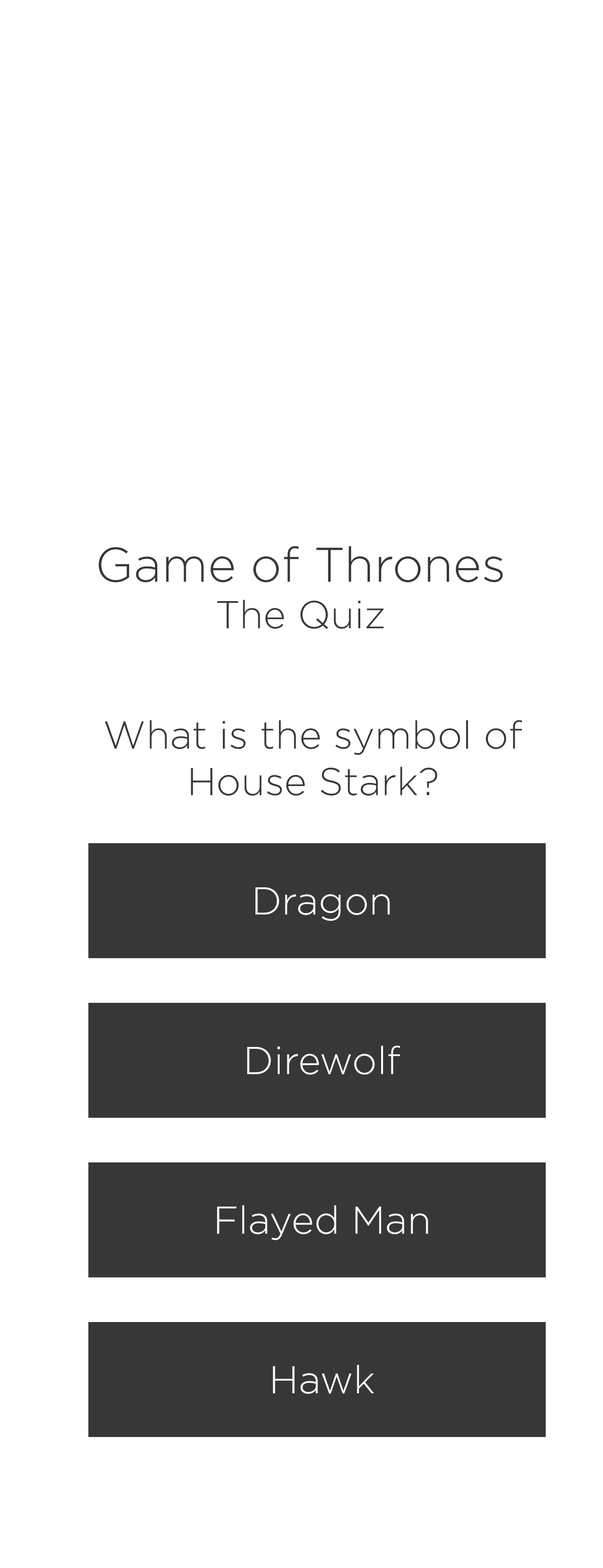
<style>
.page{position:relative;width:603px;height:1568px;background:#ffffff}
.page>*{position:absolute;margin:0}
.t1{font:48.5px "Gotham-Light";color:#373737}
.t2{font:38.8px "Gotham-Light";color:#373737}
.t3{font:38.8px "Gotham-Light";color:#ffffff}
</style>
<div class="page">
<p class="t1" style="left:98px;top:546px;width:405px;height:83px;text-align:center">Game of Thrones<br><span class="t2">The Quiz</span></p>
<p class="t2" style="left:105px;top:720px;width:417px;height:76px;text-align:center">What is the symbol of House Stark?</p>
<p class="t3" style="left:255px;top:887px;width:135px;height:34px">Dragon</p>
<p class="t3" style="left:247px;top:1045px;width:153px;height:30px">Direwolf</p>
<p class="t3" style="left:217px;top:1205px;width:211px;height:35px">Flayed Man</p>
<p class="t3" style="left:273px;top:1365px;width:101px;height:29px">Hawk</p>
</div>
